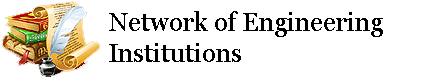
<style>
.page{position:relative;width:437px;height:77px;background:#ffffff}
.page>*{position:absolute;margin:0}
.t1{font:26px "Georgia";color:#000000}
</style>
<div class="page">
<p class="t1" style="left:109px;top:11px;width:274px;height:51px">Network of Engineering<br>Institutions</p>
</div>
